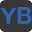
<style>
.page{position:relative;width:32px;height:32px;background:#373737}
.page>*{position:absolute;margin:0}
.t1{font:39px "HelveticaNeue-Bold";color:#2e67b1}
</style>
<div class="page">
<p class="t1" style="left:0px;top:7px;width:32px;height:17px">YB</p>
</div>
